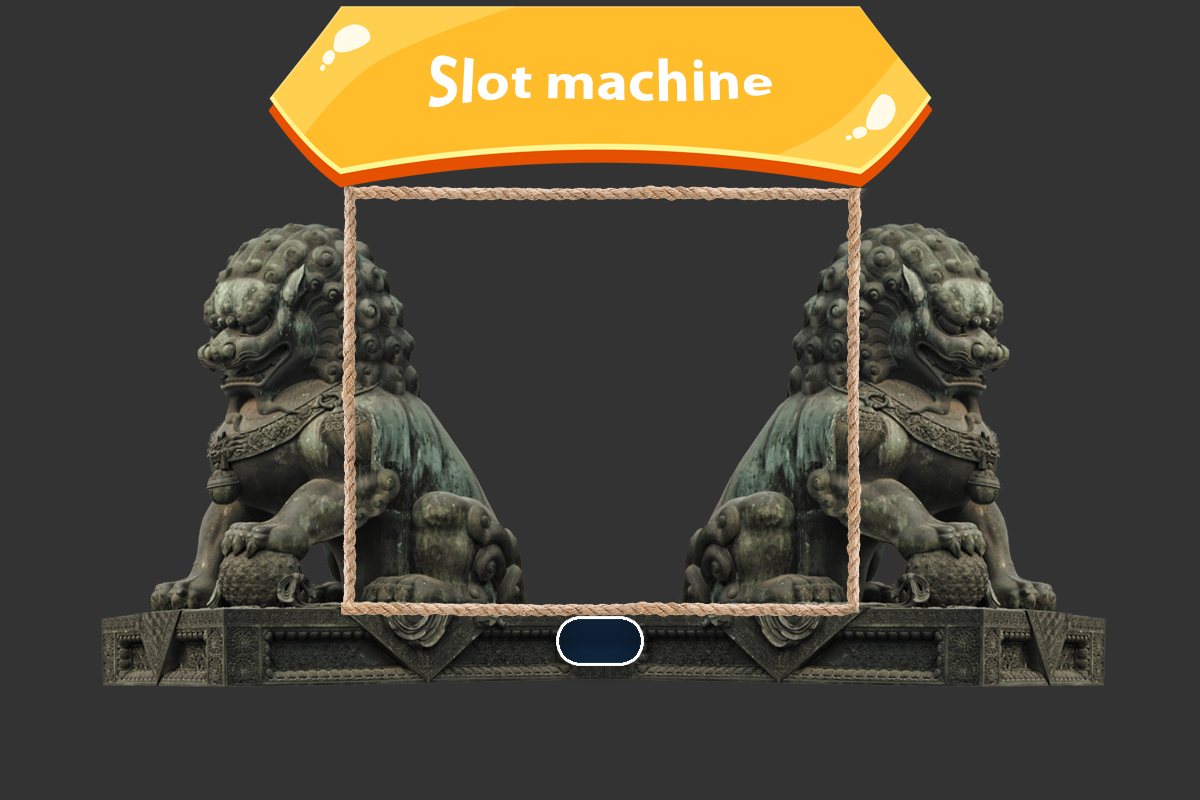
<style>
.page{position:relative;width:1200px;height:800px;background:#333333}
.page>*{position:absolute;margin:0}
.t1{font:60px "MyriadPro-Bold";color:#ffffff}
</style>
<div class="page">
<p class="t1" style="left:428px;top:55px;width:344px;height:53px">Slot machine</p>
</div>
